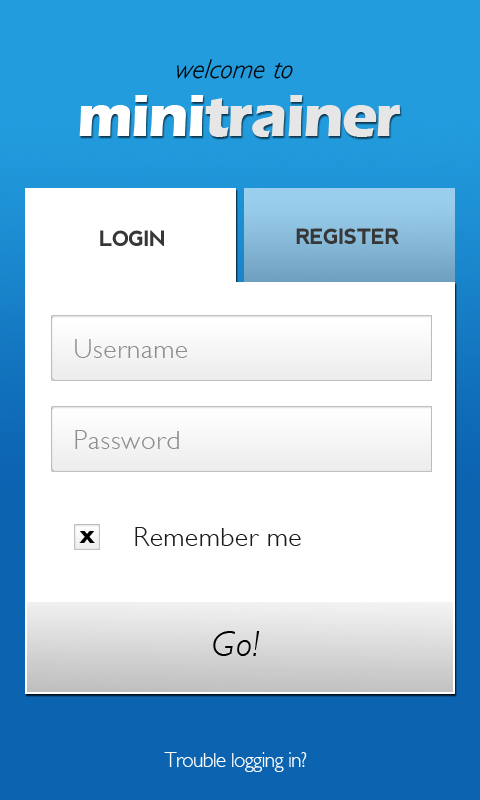
<style>
.page{position:relative;width:480px;height:800px;background:#ffffff}
.page>*{position:absolute;margin:0}
.t1{font:27px "GillSans-LightItalic";letter-spacing:0.01em;color:#000000;font-style:italic}
.t2{font:60px "ErasITC-Bold";letter-spacing:-0.03em;color:#e6e6e6}
.t3{font:60px "ErasITC-Bold";letter-spacing:-0.03em;color:#ffffff}
.t4{font:21px "nevis-Bold";letter-spacing:-0.03em;color:#373737}
.t5{font:27px "GillSans-Light";letter-spacing:0.03em;color:#8e8e8e}
.t6{font:18px "GillSans-Bold";letter-spacing:0.03em;color:#000000}
.t7{font:27px "GillSans-Light";letter-spacing:0.03em;color:#1b1b1b}
.t8{font:36px "GillSans-LightItalic";letter-spacing:0.03em;color:#000000}
.t9{font:21px "GillSans-Light";letter-spacing:-0.03em;color:#ffffff}
</style>
<div class="page">
<p class="t1" style="left:177px;top:59px;width:116px;height:20px">welcome to</p>
<p class="t2" style="left:79px;top:95px;width:322px;height:42px"><span class="t3">mini</span>trainer</p>
<p class="t4" style="left:100px;top:230px;width:64px;height:16px">LOGIN</p>
<p class="t4" style="left:296px;top:228px;width:103px;height:16px">REGISTER</p>
<p class="t5" style="left:75px;top:339px;width:113px;height:19px">Username</p>
<p class="t5" style="left:75px;top:430px;width:104px;height:19px">Password</p>
<p class="t6" style="left:79px;top:531px;width:16px;height:12px">X</p>
<p class="t7" style="left:135px;top:527px;width:166px;height:19px">Remember me</p>
<p class="t8" style="left:213px;top:631px;width:47px;height:25px">Go!</p>
<p class="t9" style="left:164px;top:752px;width:143px;height:20px">Trouble logging in?</p>
</div>
